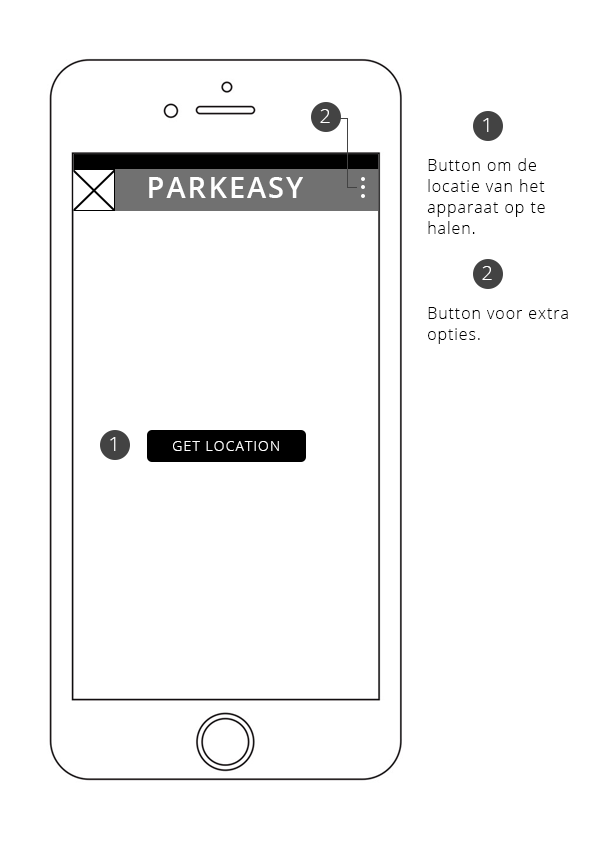
<style>
.page{position:relative;width:595px;height:842px;background:#ffffff}
.page>*{position:absolute;margin:0}
.t1{font:20px "OpenSans-Light";letter-spacing:0.06em;color:#ffffff}
.t2{font:16px/21px "OpenSans-Light";letter-spacing:0.06em;color:#000000}
.t3{font:29.4px "OpenSans-Semibold";letter-spacing:0.06em;color:#ffffff}
.t4{font:14.5px "OpenSans-Light";letter-spacing:0.06em;color:#ffffff}
</style>
<div class="page">
<p class="t1" style="left:320px;top:109px;width:10px;height:14px">2</p>
<p class="t1" style="left:483px;top:118px;width:6px;height:14px">1</p>
<p class="t2" style="left:427px;top:158px;width:118px;height:76px">Button om de<br>locatie van het <br>apparaat op te<br>halen.</p>
<p class="t3" style="left:149px;top:177px;width:154px;height:21px">PARKEASY</p>
<p class="t1" style="left:482px;top:266px;width:10px;height:14px">2</p>
<p class="t2" style="left:428px;top:307px;width:140px;height:37px">Button voor extra<br>opties.</p>
<p class="t1" style="left:110px;top:437px;width:6px;height:14px">1</p>
<p class="t4" style="left:173px;top:441px;width:106px;height:10px">GET LOCATION</p>
</div>
